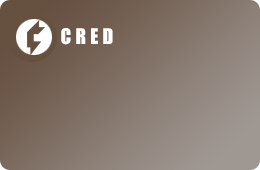
<style>
.page{position:relative;width:260px;height:170px}
.page>*{position:absolute;margin:0}
.t1{font:20px "Impact";letter-spacing:0.2em;color:#ffffff}
</style>
<div class="page">
<p class="t1" style="left:61px;top:28px;width:52px;height:17px">CRED</p>
</div>
